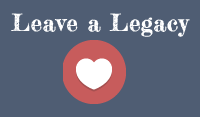
<style>
.page{position:relative;width:200px;height:117px;background:#4f5d73}
.page>*{position:absolute;margin:0}
.t1{font:22.9px "FrederickatheGreat-Regular";letter-spacing:0.03em;color:#ffffff}
</style>
<div class="page">
<p class="t1" style="left:11px;top:13px;width:179px;height:24px">Leave a Legacy</p>
</div>
